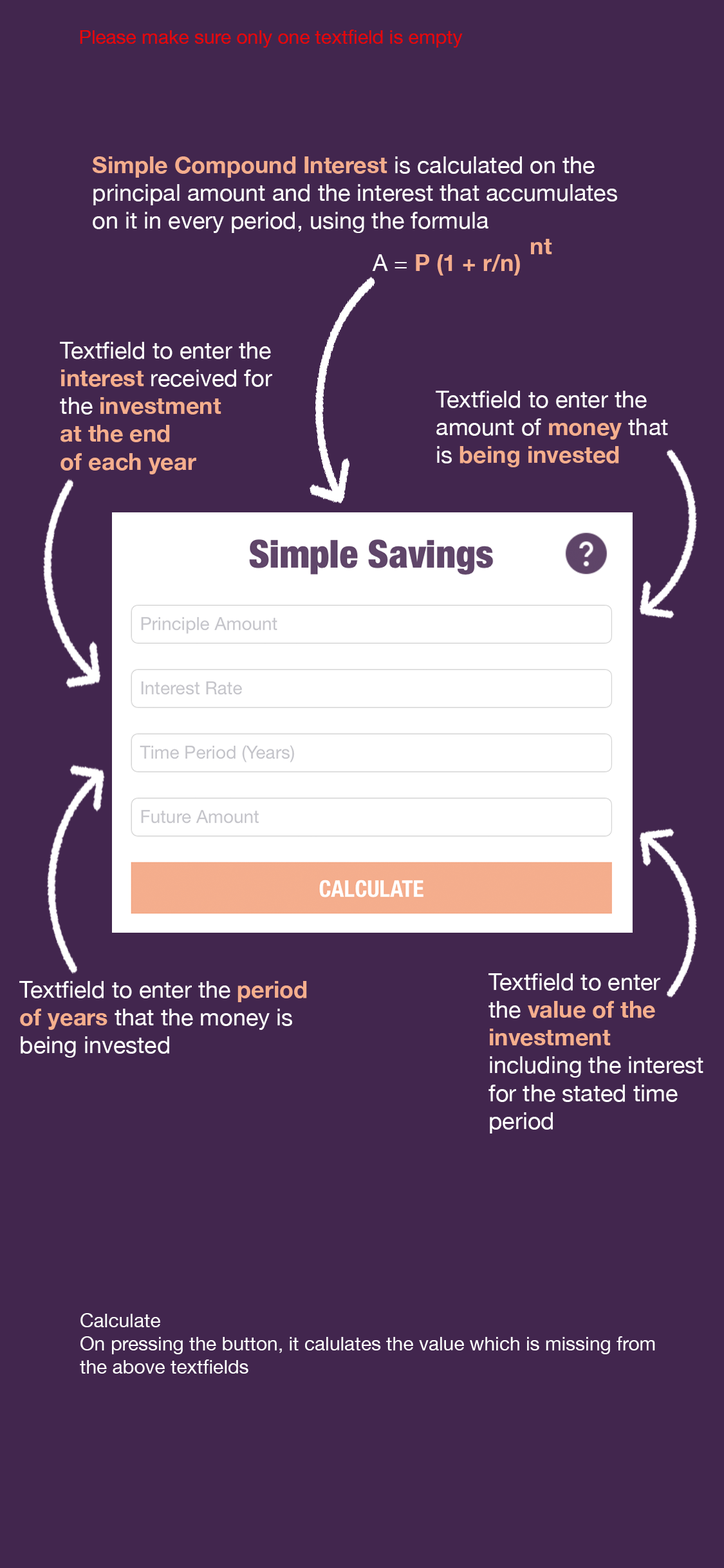
<style>
.page{position:relative;width:724px;height:1568px;background:#42264e}
.page>*{position:absolute;margin:0}
.t1{font:19.3px "HelveticaNeue";color:#eb0505}
.t2{font:23.2px "HelveticaNeue";color:#ffffff}
.t3{font:23.2px "HelveticaNeue-Bold";color:#f4ad8d}
.t4{font:23.2px "HelveticaNeue-Bold";color:#f5ae8d}
.t5{font:19.3px "HelveticaNeue";color:#ffffff}
</style>
<div class="page">
<p class="t1" style="left:80px;top:30px;width:383px;height:18px">Please make sure only one textfield is empty</p>
<p class="t2" style="left:92px;top:156px;width:525px;height:77px"><span class="t3">Simple Compound Interest </span>is calculated on the <br>principal amount and the interest that accumulates <br>on it in every period, using the formula</p>
<p class="t3" style="left:531px;top:239px;width:21px;height:15px">nt</p>
<p class="t3" style="left:372px;top:254px;width:148px;height:21px"><span class="t2">A = </span>P (1 + r/n)</p>
<p class="t4" style="left:60px;top:342px;width:212px;height:132px"><span class="t2">Textfield to enter the<br></span>interest <span class="t2">received for<br>the </span>investment <br>at the end <br>of each year</p>
<p class="t2" style="left:436px;top:391px;width:232px;height:76px">Textfield to enter the <br>amount of <span class="t4">money</span> that <br>is <span class="t4">being invested</span></p>
<p class="t2" style="left:489px;top:973px;width:215px;height:161px">Textfield to enter <br>the <span class="t4">value of the <br>investment</span> <br>including the interest<br>for the stated time <br>period</p>
<p class="t2" style="left:19px;top:981px;width:288px;height:77px">Textfield to enter the <span class="t4">period <br>of years</span> that the money is <br>being invested</p>
<p class="t5" style="left:80px;top:1313px;width:575px;height:61px">Calculate<br>On pressing the button, it calulates the value which is missing from<br>the above textfields</p>
</div>
